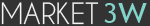
<style>
.page{position:relative;width:150px;height:26px;background:#333333}
.page>*{position:absolute;margin:0}
.t1{font:27.6px "CaviarDreams";color:#f5f5f5}
.t2{font:27.8px "TrebuchetMS";color:#83d3c9}
.t3{font:38px "TrebuchetMS";color:#83d3c9}
</style>
<div class="page">
<p class="t1" style="left:1px;top:2px;width:98px;height:23px">MARKET</p>
<p class="t2" style="left:104px;top:3px;width:43px;height:20px">3<span class="t3">w</span></p>
</div>
